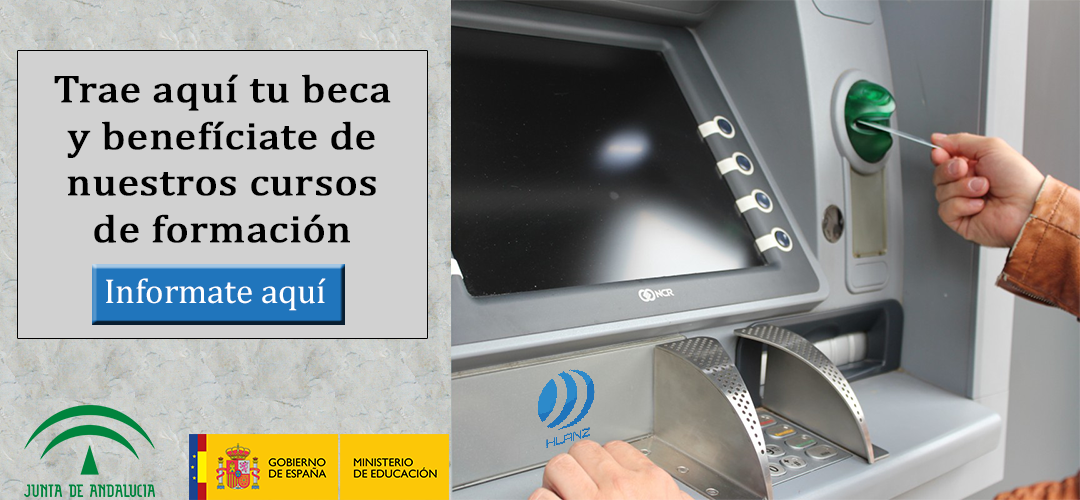
<style>
.page{position:relative;width:1080px;height:500px}
.page>*{position:absolute;margin:0}
.t1{font:39px "Cambria";color:#000000;font-weight:bold;scale:1.12 1}
.t2{font:35px "Cambria";color:#ffffff}
</style>
<div class="page">
<p class="t1" style="left:54px;top:74px;width:337px;height:169px;text-align:center">Trae aquí tu beca y benefíciate de nuestros cursos de formación</p>
<p class="t2" style="left:106px;top:278px;width:220px;height:33px">Informate aquí</p>
</div>
